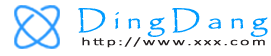
<style>
.page{position:relative;width:271px;height:56px;background:#ffffff}
.page>*{position:absolute;margin:0}
.t1{font:25.9px "Papyrus-Regular";letter-spacing:0.2em;color:#009bff;font-weight:bold;scale:1.16 1}
.t2{font:11.1px "Calibri-Light";letter-spacing:0.1em;color:#231f20;font-weight:bold;scale:1.63 1}
</style>
<div class="page">
<p class="t1" style="left:78px;top:8px;width:190px;height:29px">DingDang</p>
<p class="t2" style="left:82px;top:37px;width:183px;height:11px">http://www.xxx.com</p>
</div>
